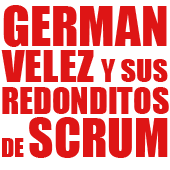
<style>
.page{position:relative;width:170px;height:170px;background:#de1515}
.page>*{position:absolute;margin:0}
.t1{font:34px/32px "Impact";color:#de1515}
.t2{font:51px/35px "Impact";color:#de1515}
.t3{font:40.9px/36px "Impact";color:#de1515;scale:1.05 1}
.t4{font:28.5px/35px "Impact";color:#de1515;scale:1.05 1}
.t5{font:24px/43px "Impact";color:#de1515}
.t6{font:49px/43px "Impact";color:#de1515}
</style>
<div class="page">
<p class="t1" style="left:1px;top:5px;width:168px;height:153px;text-align:center"><span class="t2">GERMAN<br></span><span class="t3">VELEZ </span><span class="t4">Y SUS<br></span>REDONDITOS<br><span class="t5">DE </span><span class="t6">SCRUM</span></p>
</div>
